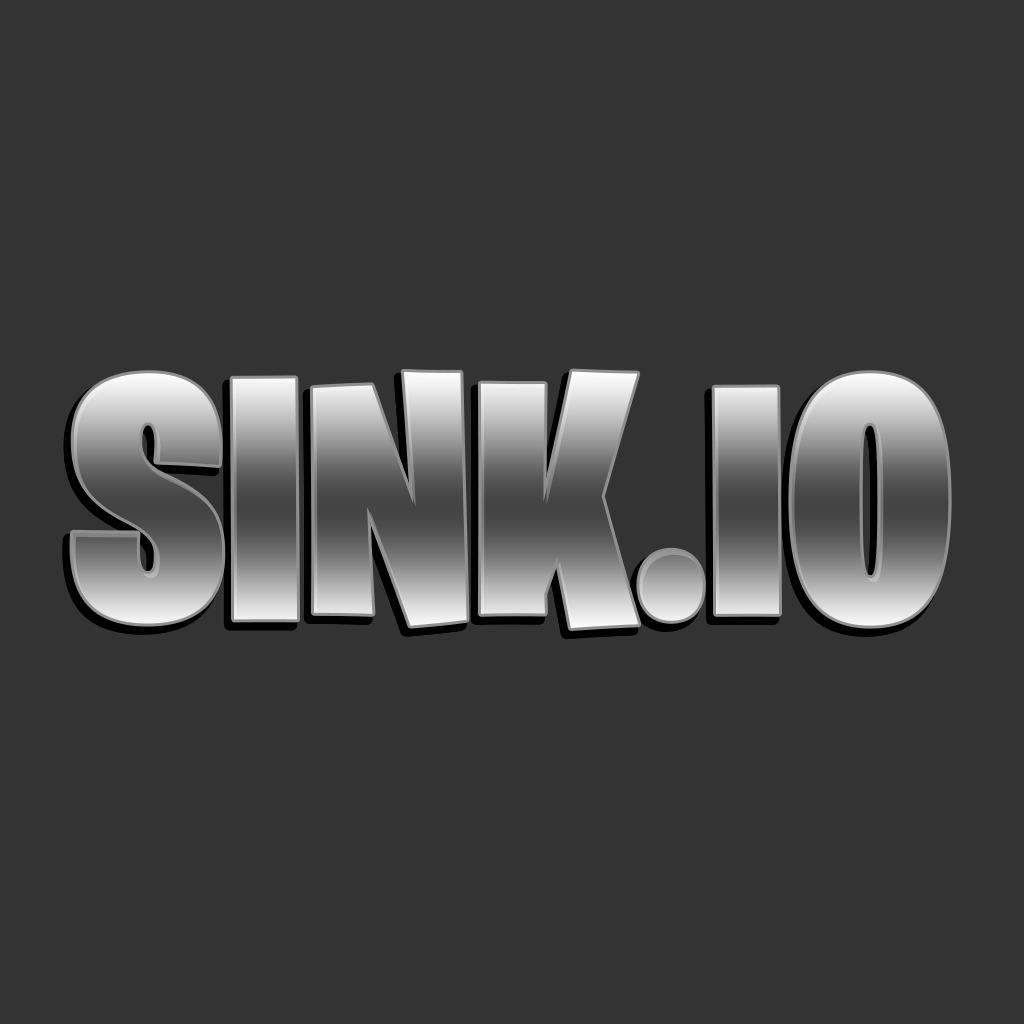
<style>
.page{position:relative;width:1024px;height:1024px;background:#333333}
.page>*{position:absolute;margin:0}
.t1{font:346.1px "BurbankBigCondensed-Black"}
</style>
<div class="page">
<p class="t1" style="left:72px;top:371px;width:877px;height:257px">SINK.IO</p>
</div>
